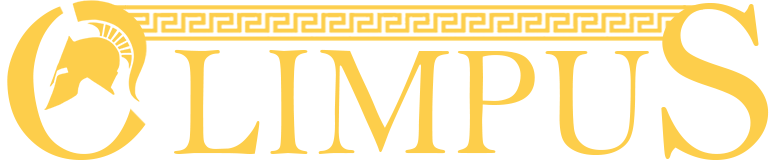
<style>
.page{position:relative;width:776px;height:162px;background:#ffffff}
.page>*{position:absolute;margin:0}
.t1{font:238px "BellMT";color:#fdce4b}
.t2{font:159.3px "BellMT";color:#fdce4b;scale:0.92 1}
</style>
<div class="page">
<p class="t1" style="left:661px;top:3px;width:108px;height:157px">S</p>
<p class="t2" style="left:174px;top:49px;width:475px;height:106px">LIMPU</p>
</div>
